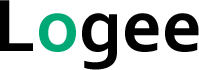
<style>
.page{position:relative;width:199px;height:70px;background:#ffffff}
.page>*{position:absolute;margin:0}
.t1{font:77.8px "Corbel-Bold";color:#010101}
.t2{font:77.8px "Corbel-Bold";color:#000000}
.t3{font:77.8px "Corbel-Bold";color:#00a875}
</style>
<div class="page">
<p class="t1" style="left:0px;top:0px;width:199px;height:70px"><span class="t2">L</span><span class="t3">o</span>gee</p>
</div>
